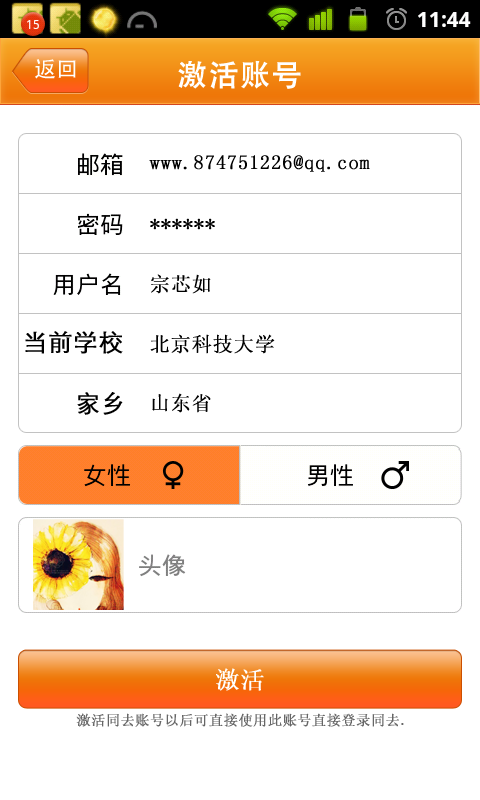
<style>
.page{position:relative;width:480px;height:800px;background:#ffffff}
.page>*{position:absolute;margin:0}
.t1{font:22px "STHeiti";color:#ffffff}
.t2{font:30px "AdobeHeitiStd-Regular";letter-spacing:0.025em;color:#ffffff;font-weight:bold}
.t3{font:20px "SimSun";letter-spacing:0.025em;color:#000000;font-weight:bold}
.t4{font:24px "STXihei";letter-spacing:0.025em;color:#000000;font-weight:bold}
.t5{font:24px "SimSun";letter-spacing:0.025em;color:#ffffff;font-weight:bold}
.t6{font:14px "SimSun";letter-spacing:0.025em;color:#666666;font-weight:bold}
</style>
<div class="page">
<p class="t1" style="left:35px;top:59px;width:41px;height:20px">返回</p>
<p class="t2" style="left:178px;top:60px;width:123px;height:29px">激活账号</p>
<p class="t3" style="left:149px;top:155px;width:221px;height:17px">www.874751226@qq.com</p>
<p class="t3" style="left:150px;top:218px;width:65px;height:12px">******</p>
<p class="t3" style="left:151px;top:274px;width:60px;height:20px">宗芯如</p>
<p class="t4" style="left:25px;top:331px;width:98px;height:23px">当前学校</p>
<p class="t3" style="left:150px;top:334px;width:125px;height:20px">北京科技大学</p>
<p class="t4" style="left:77px;top:392px;width:46px;height:23px">家乡</p>
<p class="t3" style="left:152px;top:393px;width:59px;height:20px">山东省</p>
<p class="t5" style="left:216px;top:668px;width:48px;height:23px">激活</p>
<p class="t6" style="left:76px;top:713px;width:328px;height:14px">激活同去账号以后可直接使用此账号直接登录同去.</p>
</div>
